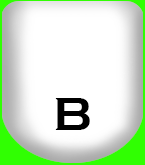
<style>
.page{position:relative;width:145px;height:165px;background:#ffffff}
.page>*{position:absolute;margin:0}
.t1{font:48px "CopperplateGothic-Bold";color:#000000}
</style>
<div class="page">
<p class="t1" style="left:55px;top:98px;width:35px;height:32px">B</p>
</div>
